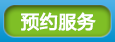
<style>
.page{position:relative;width:115px;height:42px}
.page>*{position:absolute;margin:0}
.t1{font:18px "MicrosoftYaHei";letter-spacing:0.015em;color:#ffffff;font-weight:bold}
</style>
<div class="page">
<p class="t1" style="left:21px;top:12px;width:75px;height:19px">预约服务</p>
</div>
